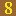
<style>
.page{position:relative;width:16px;height:16px;background:#996633}
.page>*{position:absolute;margin:0}
.t1{font:18px "Sylfaen";color:#f5e814}
</style>
<div class="page">
<p class="t1" style="left:5px;top:2px;width:7px;height:12px">8</p>
</div>
